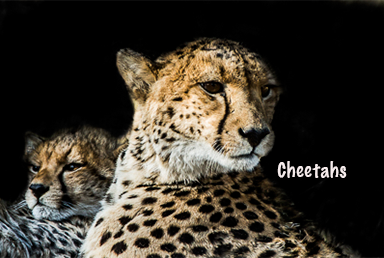
<style>
.page{position:relative;width:384px;height:258px;background:#000000}
.page>*{position:absolute;margin:0}
.t1{font:18.8px "MarkerFelt-Thin";color:#f6ecec}
</style>
<div class="page">
<p class="t1" style="left:277px;top:161px;width:70px;height:17px">Cheetahs</p>
</div>
